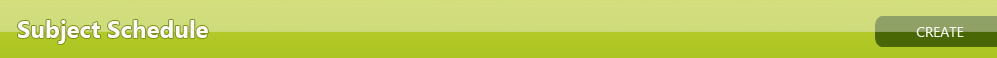
<style>
.page{position:relative;width:997px;height:58px}
.page>*{position:absolute;margin:0}
.t1{font:24px "SegoeUI-Bold";color:#fefefe}
.t2{font:14px "SegoeUI";color:#f6f7f1}
</style>
<div class="page">
<p class="t1" style="left:18px;top:20px;width:190px;height:24px">Subject Schedule</p>
<p class="t2" style="left:916px;top:27px;width:48px;height:10px">CREATE</p>
</div>
